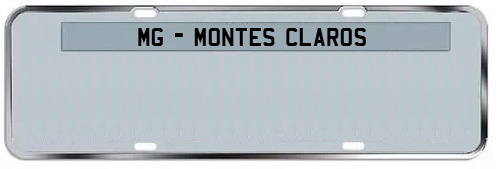
<style>
.page{position:relative;width:499px;height:169px}
.page>*{position:absolute;margin:0}
.t1{font:27.8px "Mandatory";color:#000000}
</style>
<div class="page">
<p class="t1" style="left:138px;top:28px;width:228px;height:18px">mg - montes claros</p>
</div>
